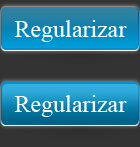
<style>
.page{position:relative;width:140px;height:147px}
.page>*{position:absolute;margin:0}
.t1{font:24px "TimesNewRomanPSMT";color:#ffffff}
</style>
<div class="page">
<p class="t1" style="left:14px;top:20px;width:113px;height:22px">Regularizar</p>
<p class="t1" style="left:14px;top:95px;width:113px;height:22px">Regularizar</p>
</div>
